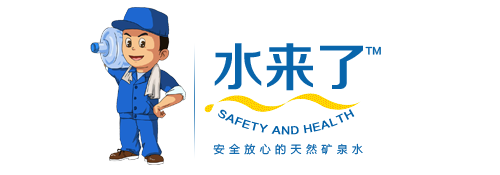
<style>
.page{position:relative;width:500px;height:175px;background:#ffffff}
.page>*{position:absolute;margin:0}
.t1{font:52px "FZZZHONGJW--GB1-0";color:#0865ab}
.t2{font:9.4px "FZLTZHK--GBK1-0";color:#0865ab}
.t3{font:9.3px/8.6px "FZZZHONGJW--GB1-0";letter-spacing:0.075em;color:#0361a9}
.t4{font:11px "FZLTXIHK--GBK1-0";letter-spacing:0.4em;color:#0361a9}
</style>
<div class="page">
<p class="t1" style="left:214px;top:43px;width:149px;height:48px">水来了</p>
<p class="t2" style="left:365px;top:46px;width:16px;height:9px">TM</p>
<p class="t3" style="left:218px;top:109px;width:137px;height:26px">SAFETY AND HEALTH</p>
<p class="t4" style="left:213px;top:143px;width:150px;height:12px">安全放心的天然矿泉水</p>
</div>
